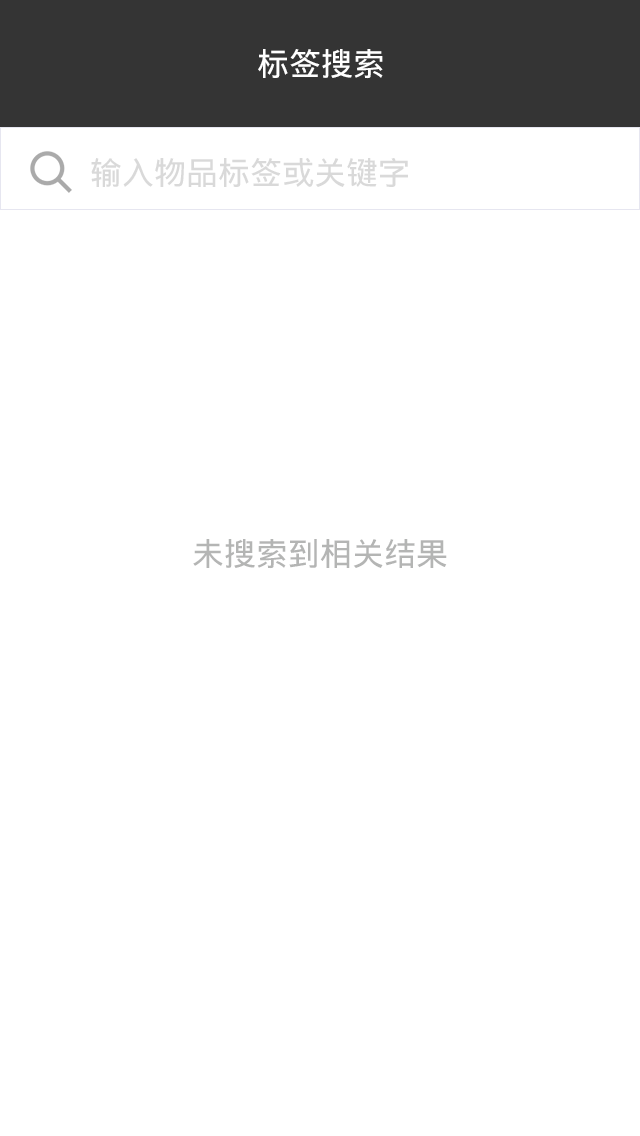
<style>
.page{position:relative;width:640px;height:1136px;background:#ffffff}
.page>*{position:absolute;margin:0}
.t1{font:32px "DroidSansFallback";color:#ffffff}
.t2{font:32px "DroidSansFallback";color:#d9d9d9}
.t3{font:32px "DroidSansFallback";color:#b4b5b4}
</style>
<div class="page">
<p class="t1" style="left:258px;top:49px;width:125px;height:30px">标签搜索</p>
<p class="t2" style="left:91px;top:158px;width:317px;height:29px">输入物品标签或关键字</p>
<p class="t3" style="left:193px;top:539px;width:254px;height:30px">未搜索到相关结果</p>
</div>
